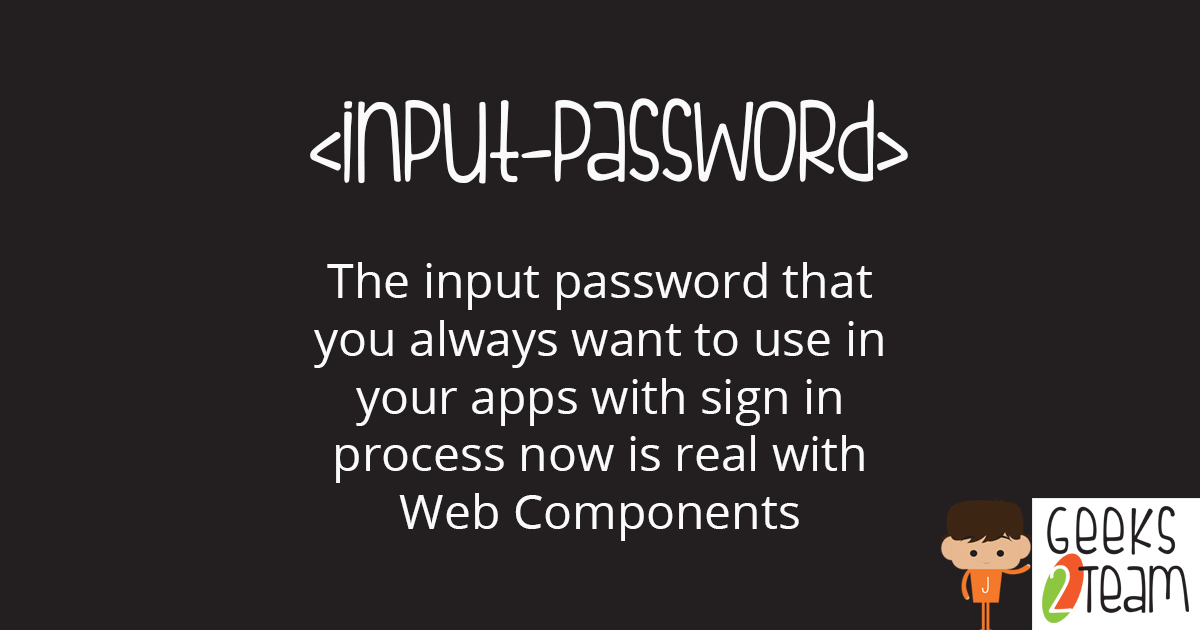
<style>
.page{position:relative;width:1200px;height:630px;background:#231f20}
.page>*{position:absolute;margin:0}
.t1{font:120px "FISHfingers";color:#fafafa}
.t2{font:48px "OpenSans";color:#fafafa}
</style>
<div class="page">
<p class="t1" style="left:310px;top:98px;width:598px;height:86px">&lt;input-password&gt;</p>
<p class="t2" style="left:314px;top:262px;width:569px;height:279px;text-align:center">The input password that you always want to use in your apps with sign in process now is real with Web Components</p>
</div>
